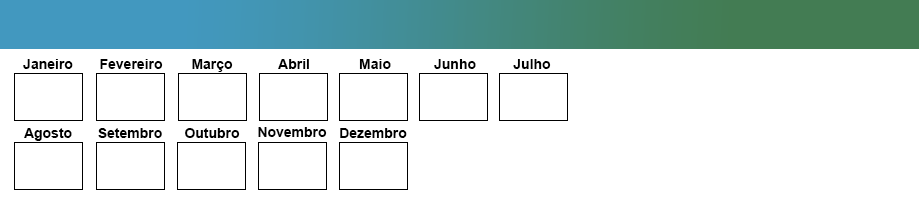
<style>
.page{position:relative;width:919px;height:206px;background:#ffffff}
.page>*{position:absolute;margin:0}
.t1{font:14px "Arial-BoldMT";color:#000000}
</style>
<div class="page">
<p class="t1" style="left:23px;top:59px;width:50px;height:10px">Janeiro</p>
<p class="t1" style="left:100px;top:59px;width:63px;height:10px">Fevereiro</p>
<p class="t1" style="left:192px;top:59px;width:41px;height:13px">Março</p>
<p class="t1" style="left:278px;top:59px;width:31px;height:10px">Abril</p>
<p class="t1" style="left:359px;top:59px;width:32px;height:10px">Maio</p>
<p class="t1" style="left:434px;top:59px;width:42px;height:10px">Junho</p>
<p class="t1" style="left:513px;top:59px;width:38px;height:10px">Julho</p>
<p class="t1" style="left:24px;top:128px;width:48px;height:13px">Agosto</p>
<p class="t1" style="left:98px;top:128px;width:64px;height:10px">Setembro</p>
<p class="t1" style="left:185px;top:128px;width:55px;height:10px">Outubro</p>
<p class="t1" style="left:258px;top:127px;width:69px;height:10px">Novembro</p>
<p class="t1" style="left:340px;top:128px;width:67px;height:10px">Dezembro</p>
</div>
